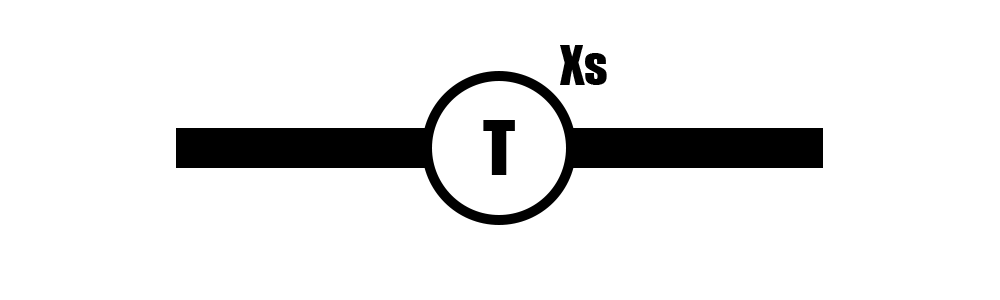
<style>
.page{position:relative;width:1000px;height:300px;background:#ffffff}
.page>*{position:absolute;margin:0}
.t1{font:50px "Impact";color:#000000}
.t2{font:70px "Impact";color:#000000}
</style>
<div class="page">
<p class="t1" style="left:560px;top:45px;width:47px;height:40px">Xs</p>
<p class="t2" style="left:483px;top:120px;width:32px;height:55px">T</p>
</div>
